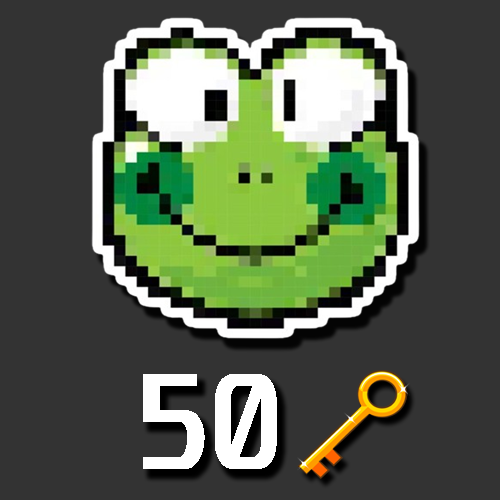
<style>
.page{position:relative;width:500px;height:500px;background:#333333}
.page>*{position:absolute;margin:0}
.t1{font:117.4px "Unispace-Bold";color:#ffffff}
</style>
<div class="page">
<p class="t1" style="left:143px;top:374px;width:134px;height:95px">50</p>
</div>
